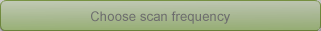
<style>
.page{position:relative;width:321px;height:31px}
.page>*{position:absolute;margin:0}
.t1{font:13.3px "ArialMT";color:#6e6e6e}
</style>
<div class="page">
<p class="t1" style="left:91px;top:11px;width:139px;height:13px">Choose scan frequency</p>
</div>
